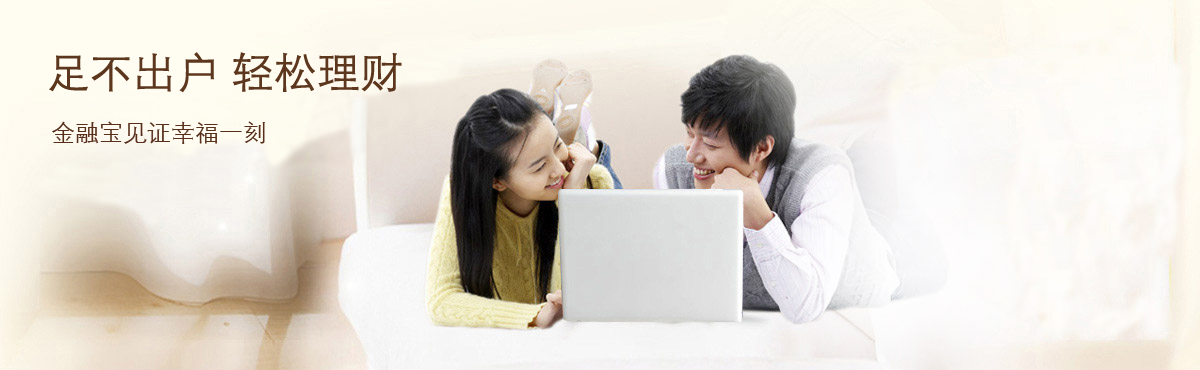
<style>
.page{position:relative;width:1200px;height:370px}
.page>*{position:absolute;margin:0}
.t1{font:42px "STXihei";color:#5d361e;font-weight:bold}
.t2{font:24px "STXihei";color:#582f1b}
</style>
<div class="page">
<p class="t1" style="left:49px;top:52px;width:353px;height:41px">足不出户 轻松理财</p>
<p class="t2" style="left:52px;top:121px;width:213px;height:23px">金融宝见证幸福一刻</p>
</div>
